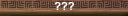
<style>
.page{position:relative;width:128px;height:16px}
.page>*{position:absolute;margin:0}
.t1{font:11px "Arial-BoldMT";color:#ffffff}
</style>
<div class="page">
<p class="t1" style="left:54px;top:2px;width:20px;height:8px">???</p>
</div>
